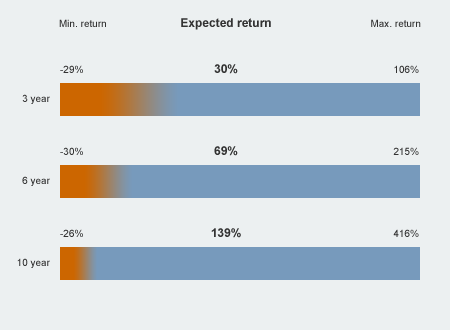
<style>
.page{position:relative;width:450px;height:330px;background:#ecf0f1}
.page>*{position:absolute;margin:0}
.t1{font:10px "ArialMT";color:#333333}
.t2{font:12px "Arial-BoldMT";color:#333333}
</style>
<div class="page">
<p class="t1" style="left:59px;top:19px;width:47px;height:8px">Min. return</p>
<p class="t2" style="left:181px;top:18px;width:90px;height:12px">Expected return</p>
<p class="t1" style="left:371px;top:19px;width:50px;height:8px">Max. return</p>
<p class="t1" style="left:60px;top:65px;width:23px;height:8px">-29%</p>
<p class="t2" style="left:214px;top:64px;width:24px;height:10px">30%</p>
<p class="t1" style="left:394px;top:65px;width:25px;height:8px">106%</p>
<p class="t1" style="left:22px;top:94px;width:28px;height:10px">3 year</p>
<p class="t1" style="left:60px;top:147px;width:23px;height:8px">-30%</p>
<p class="t2" style="left:214px;top:146px;width:24px;height:10px">69%</p>
<p class="t1" style="left:393px;top:147px;width:26px;height:8px">215%</p>
<p class="t1" style="left:22px;top:176px;width:28px;height:10px">6 year</p>
<p class="t1" style="left:60px;top:229px;width:23px;height:8px">-26%</p>
<p class="t2" style="left:211px;top:228px;width:30px;height:10px">139%</p>
<p class="t1" style="left:393px;top:229px;width:26px;height:8px">416%</p>
<p class="t1" style="left:17px;top:258px;width:33px;height:10px">10 year</p>
</div>
